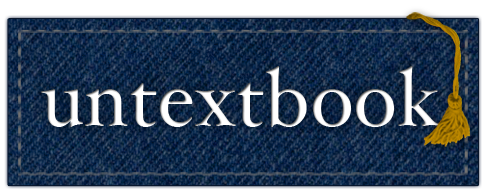
<style>
.page{position:relative;width:488px;height:195px}
.page>*{position:absolute;margin:0}
.t1{font:81.7px "HoeflerText-Regular";color:#ffffff}
</style>
<div class="page">
<p class="t1" style="left:41px;top:66px;width:401px;height:61px">untextbook</p>
</div>
